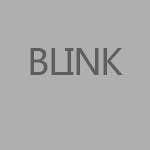
<style>
.page{position:relative;width:150px;height:150px;background:#afafaf}
.page>*{position:absolute;margin:0}
.t1{font:35.8px "MicrosoftYaHeiUI";letter-spacing:-0.05em;color:#5e5e5e}
</style>
<div class="page">
<p class="t1" style="left:30px;top:48px;width:93px;height:27px">BLINK</p>
</div>
